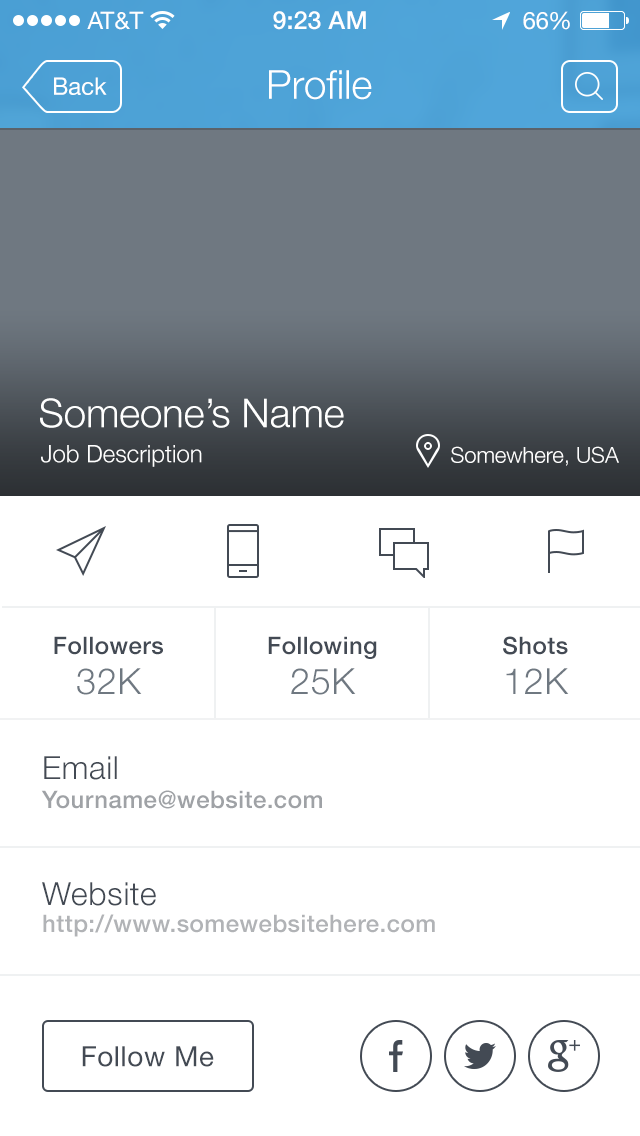
<style>
.page{position:relative;width:640px;height:1136px;background:#ffffff}
.page>*{position:absolute;margin:0}
.t1{font:24px "HelveticaNeue";color:#ffffff}
.t2{font:25px "HelveticaNeue-Medium";color:#ffffff}
.t3{font:24px "HelveticaNeue";letter-spacing:-0.02em;color:#ffffff}
.t4{font:40px "HelveticaNeue-Light";color:#ffffff}
.t5{font:24px "HelveticaNeue-Light";color:#ffffff}
.t6{font:22px "HelveticaNeue-Light";color:#ffffff}
.t7{font:24px/40px "HelveticaNeue-Medium";letter-spacing:0.02em;color:#434a54}
.t8{font:36px/40px "HelveticaNeue-Light";letter-spacing:0.02em;color:#6f7881}
.t9{font:32px "HelveticaNeue-Light";letter-spacing:0.02em;color:#434a54}
.t10{font:24px "HelveticaNeue-Medium";letter-spacing:0.02em;color:#9fa2a6}
.t11{font:24px "HelveticaNeue-Medium";letter-spacing:0.02em;color:#b1b3b6}
.t12{font:28px "HelveticaNeue";letter-spacing:0.02em;color:#434a54}
</style>
<div class="page">
<p class="t1" style="left:87px;top:11px;width:57px;height:19px">AT&amp;T</p>
<p class="t2" style="left:273px;top:11px;width:93px;height:19px">9:23 AM</p>
<p class="t1" style="left:523px;top:11px;width:47px;height:19px">6<span class="t3">6</span>%</p>
<p class="t1" style="left:54px;top:77px;width:53px;height:18px">Back</p>
<p class="t4" style="left:269px;top:70px;width:103px;height:30px">Profile</p>
<p class="t4" style="left:40px;top:398px;width:304px;height:30px">Someone’s Name</p>
<p class="t5" style="left:41px;top:445px;width:161px;height:22px">Job Description</p>
<p class="t6" style="left:451px;top:446px;width:168px;height:20px">Somewhere, USA</p>
<p class="t7" style="left:54px;top:636px;width:109px;height:59px;text-align:center">Followers<br><span class="t8">32K</span></p>
<p class="t7" style="left:268px;top:636px;width:109px;height:59px;text-align:center">Following<br><span class="t8">25K</span></p>
<p class="t7" style="left:503px;top:636px;width:66px;height:58px;text-align:center">Shots<br><span class="t8">12K</span></p>
<p class="t9" style="left:44px;top:756px;width:73px;height:24px">Email</p>
<p class="t10" style="left:41px;top:790px;width:281px;height:19px">Yourname@website.com</p>
<p class="t9" style="left:42px;top:882px;width:114px;height:24px">Website</p>
<p class="t11" style="left:43px;top:914px;width:392px;height:23px">http://www.somewebsitehere.com</p>
<p class="t12" style="left:82px;top:1046px;width:132px;height:21px">Follow Me</p>
</div>
